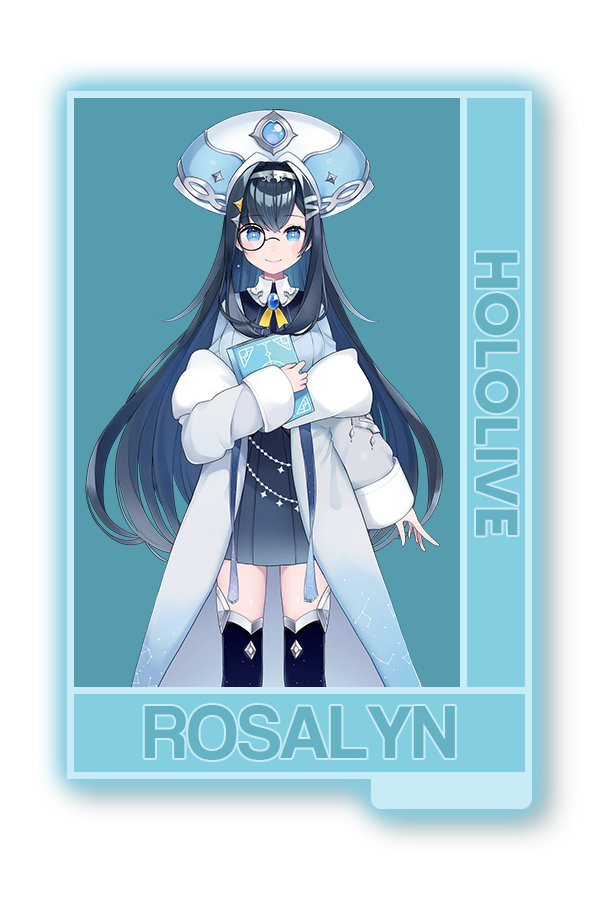
<style>
.page{position:relative;width:600px;height:900px;background:#ffffff}
.page>*{position:absolute;margin:0}
.t1{font:59.2px "MADETOMMY-Bold";color:#66b2c5}
.t2{font:75.6px "CoolveticaRg-Regular";color:#66b2c5}
</style>
<div class="page">
<p class="t1" style="left:475px;top:252px;width:44px;height:284px;rotate:90deg">HOLOLIVE</p>
<p class="t2" style="left:144px;top:705px;width:311px;height:55px">ROSALYN</p>
</div>
